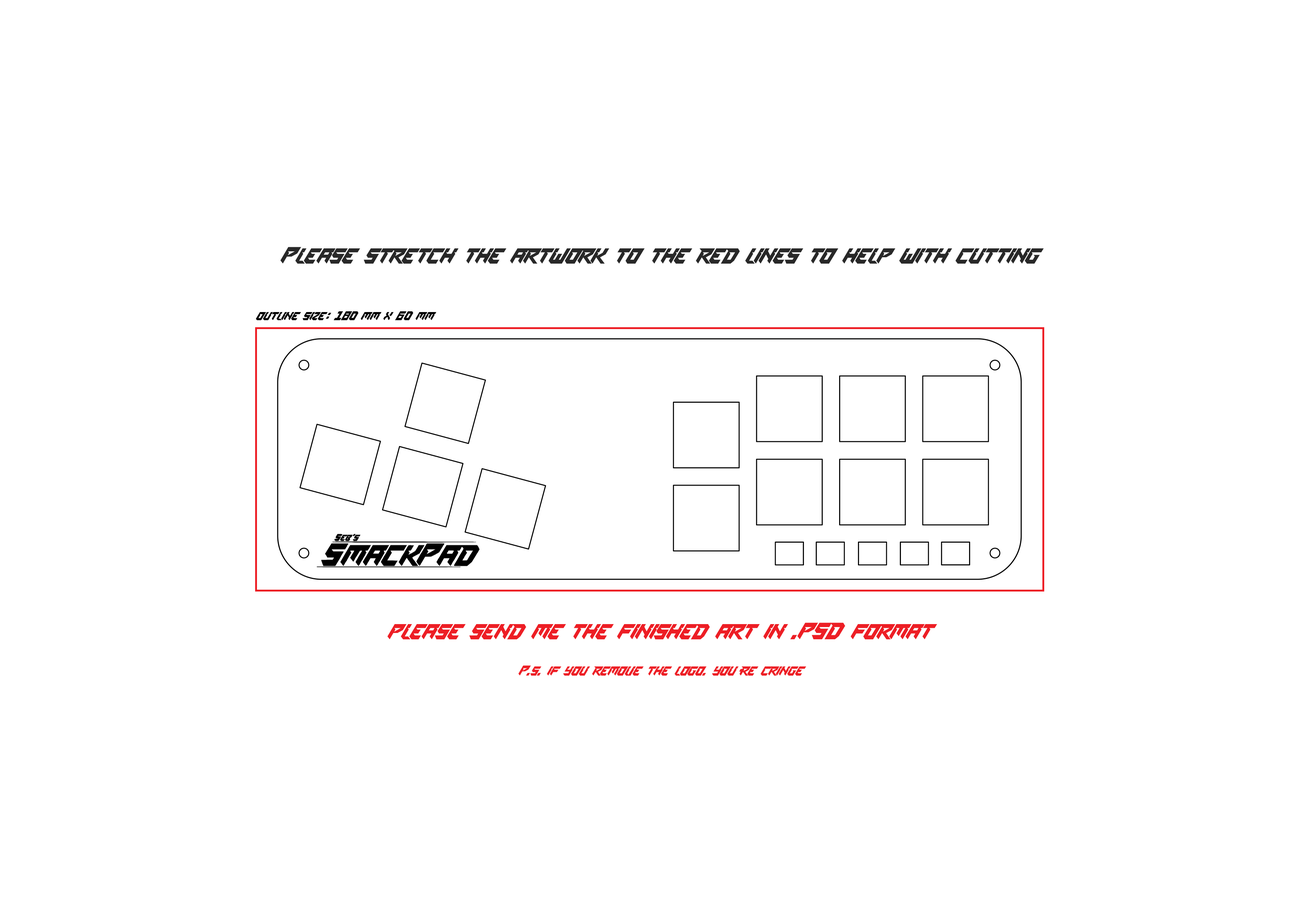
<style>
.page{position:relative;width:1299px;height:918px;background:#ffffff}
.page>*{position:absolute;margin:0}
.t1{font:23.1px "SPACEMISSION";color:#282828}
.t2{font:12.3px "SPACEMISSION";color:#000000}
.t3{font:23.1px "SPACEMISSION";color:#ed1e25}
.t4{font:13.9px "SPACEMISSION";color:#ed1e25}
</style>
<div class="page">
<p class="t1" style="left:280px;top:247px;width:764px;height:17px">Please stretch the artwork to the red lines to help with cutting</p>
<p class="t2" style="left:256px;top:311px;width:180px;height:10px">outline size: 180 mm x 60 mm</p>
<p class="t3" style="left:387px;top:623px;width:550px;height:17px">please send me the finished art in .PSD format</p>
<p class="t4" style="left:518px;top:666px;width:288px;height:10px">P.s. if you remove the logo. you’re cringe</p>
</div>
